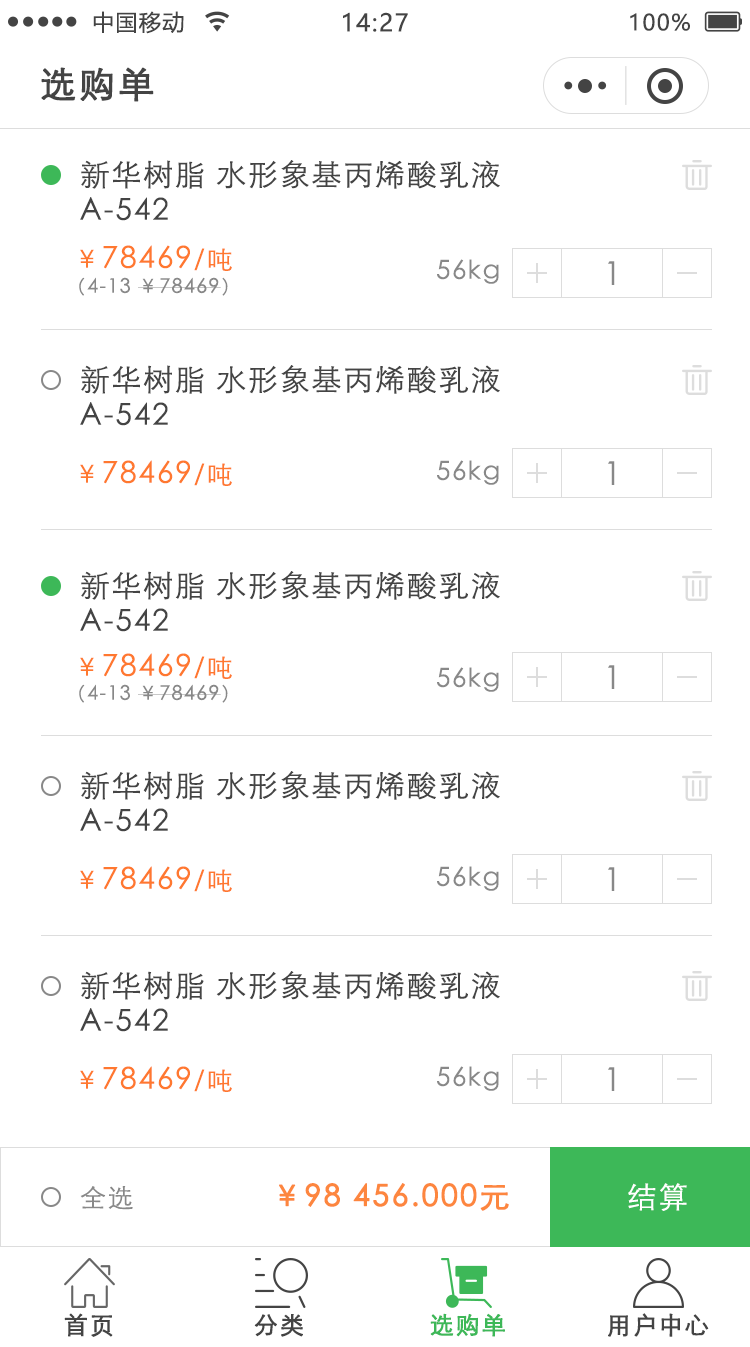
<style>
.page{position:relative;width:750px;height:1347px;background:#ffffff}
.page>*{position:absolute;margin:0}
.t1{font:22px "MicrosoftYaHei";letter-spacing:0.06em;color:#444444}
.t2{font:24px "MicrosoftYaHei";letter-spacing:0.06em;color:#444444}
.t3{font:36px "STXihei";letter-spacing:0.06em;color:#444444;font-weight:bold}
.t4{font:30px/36px "STXihei";letter-spacing:0.06em;color:#444444}
.t5{font:30px "STXihei";letter-spacing:0.06em;color:#ff782f}
.t6{font:26px "STXihei";letter-spacing:0.06em;color:#ff782f}
.t7{font:26px "STXihei";letter-spacing:0.06em;color:#888888}
.t8{font:32.5px "STXihei";letter-spacing:0.06em;color:#888888}
.t9{font:20px "STXihei";letter-spacing:0.06em;color:#888888}
.t10{font:30px "STXihei";letter-spacing:0.06em;color:#fd863e;font-weight:bold}
.t11{font:29.9px "STXihei";letter-spacing:0.06em;color:#ffffff}
.t12{font:23.9px "STXihei";letter-spacing:0.06em;color:#444444;font-weight:bold}
.t13{font:23.9px "STXihei";letter-spacing:0.06em;color:#3db858;font-weight:bold}
</style>
<div class="page">
<p class="t1" style="left:93px;top:11px;width:91px;height:23px">中国移动</p>
<p class="t2" style="left:343px;top:12px;width:65px;height:20px">14:27</p>
<p class="t1" style="left:630px;top:13px;width:60px;height:18px">100%</p>
<p class="t3" style="left:41px;top:67px;width:113px;height:35px">选购单</p>
<p class="t4" style="left:80px;top:160px;width:420px;height:61px">新华树脂 水形象基丙烯酸乳液<br>A-542</p>
<p class="t5" style="left:80px;top:245px;width:152px;height:26px"><span class="t6">￥</span>78469<span class="t6">/吨</span></p>
<p class="t7" style="left:437px;top:259px;width:62px;height:25px">56kg</p>
<p class="t8" style="left:608px;top:261px;width:7px;height:24px">1</p>
<p class="t9" style="left:79px;top:277px;width:149px;height:19px">（4-13 ￥78469）</p>
<p class="t4" style="left:80px;top:365px;width:420px;height:61px">新华树脂 水形象基丙烯酸乳液<br>A-542</p>
<p class="t5" style="left:80px;top:460px;width:152px;height:26px"><span class="t6">￥</span>78469<span class="t6">/吨</span></p>
<p class="t7" style="left:437px;top:460px;width:62px;height:25px">56kg</p>
<p class="t8" style="left:608px;top:461px;width:7px;height:24px">1</p>
<p class="t4" style="left:80px;top:571px;width:420px;height:61px">新华树脂 水形象基丙烯酸乳液<br>A-542</p>
<p class="t5" style="left:80px;top:653px;width:152px;height:26px"><span class="t6">￥</span>78469<span class="t6">/吨</span></p>
<p class="t8" style="left:608px;top:665px;width:7px;height:24px">1</p>
<p class="t7" style="left:437px;top:667px;width:62px;height:25px">56kg</p>
<p class="t9" style="left:79px;top:684px;width:149px;height:19px">（4-13 ￥78469）</p>
<p class="t4" style="left:80px;top:771px;width:420px;height:61px">新华树脂 水形象基丙烯酸乳液<br>A-542</p>
<p class="t5" style="left:80px;top:866px;width:152px;height:26px"><span class="t6">￥</span>78469<span class="t6">/吨</span></p>
<p class="t7" style="left:437px;top:866px;width:62px;height:25px">56kg</p>
<p class="t8" style="left:608px;top:867px;width:7px;height:24px">1</p>
<p class="t4" style="left:80px;top:971px;width:420px;height:61px">新华树脂 水形象基丙烯酸乳液<br>A-542</p>
<p class="t5" style="left:80px;top:1066px;width:152px;height:26px"><span class="t6">￥</span>78469<span class="t6">/吨</span></p>
<p class="t7" style="left:437px;top:1066px;width:62px;height:25px">56kg</p>
<p class="t8" style="left:608px;top:1067px;width:7px;height:24px">1</p>
<p class="t7" style="left:80px;top:1186px;width:53px;height:24px">全选</p>
<p class="t10" style="left:279px;top:1183px;width:230px;height:28px">￥98 456.000元</p>
<p class="t11" style="left:628px;top:1183px;width:59px;height:28px">结算</p>
<p class="t12" style="left:64px;top:1313px;width:49px;height:24px">首页</p>
<p class="t13" style="left:430px;top:1313px;width:75px;height:24px">选购单</p>
<p class="t12" style="left:608px;top:1313px;width:101px;height:24px">用户中心</p>
<p class="t12" style="left:254px;top:1314px;width:49px;height:23px">分类</p>
</div>
